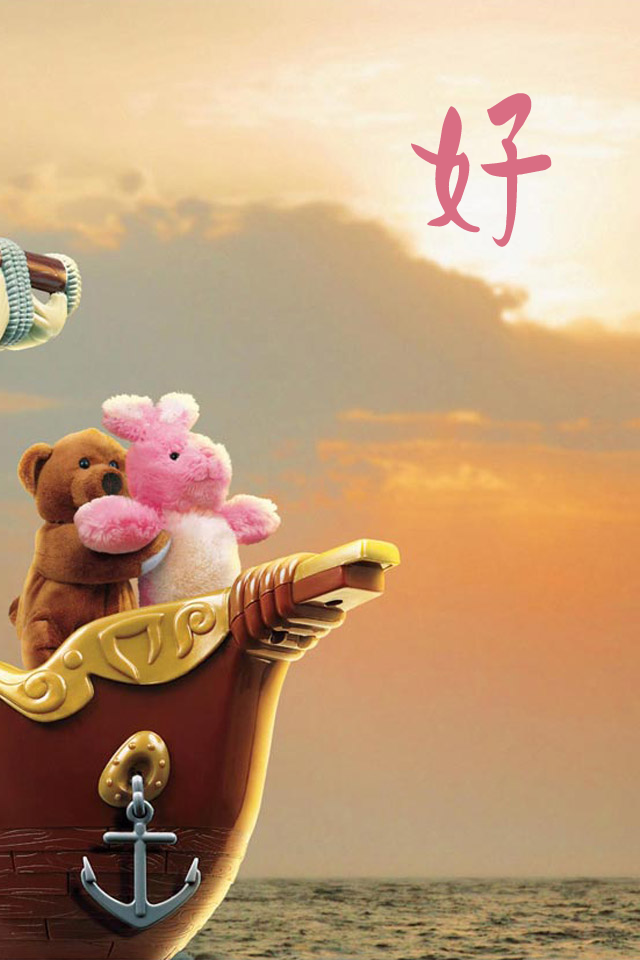
<style>
.page{position:relative;width:640px;height:960px}
.page>*{position:absolute;margin:0}
.t1{font:180px "¾­µä·±ÖÐ±ä Regular";color:#d96d83}
</style>
<div class="page">
<p class="t1" style="left:411px;top:93px;width:141px;height:154px">好</p>
</div>
